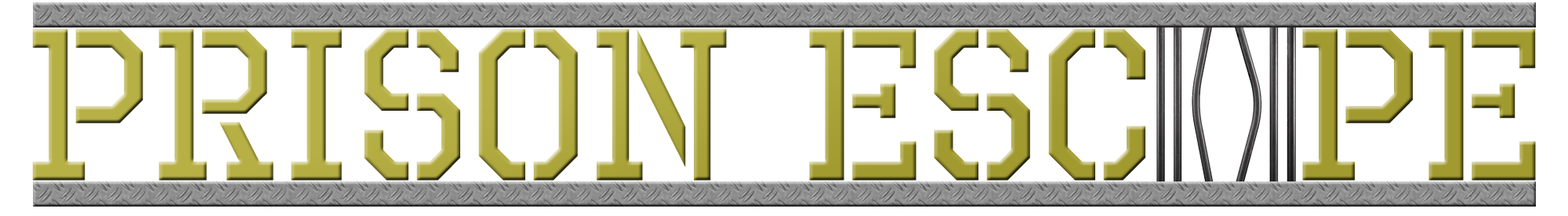
<style>
.page{position:relative;width:1568px;height:216px;background:#ffffff}
.page>*{position:absolute;margin:0}
.t1{font:215.6px "OctinPrisonFree"}
</style>
<div class="page">
<p class="t1" style="left:32px;top:29px;width:1504px;height:151px">PRISON esc  pe</p>
</div>
